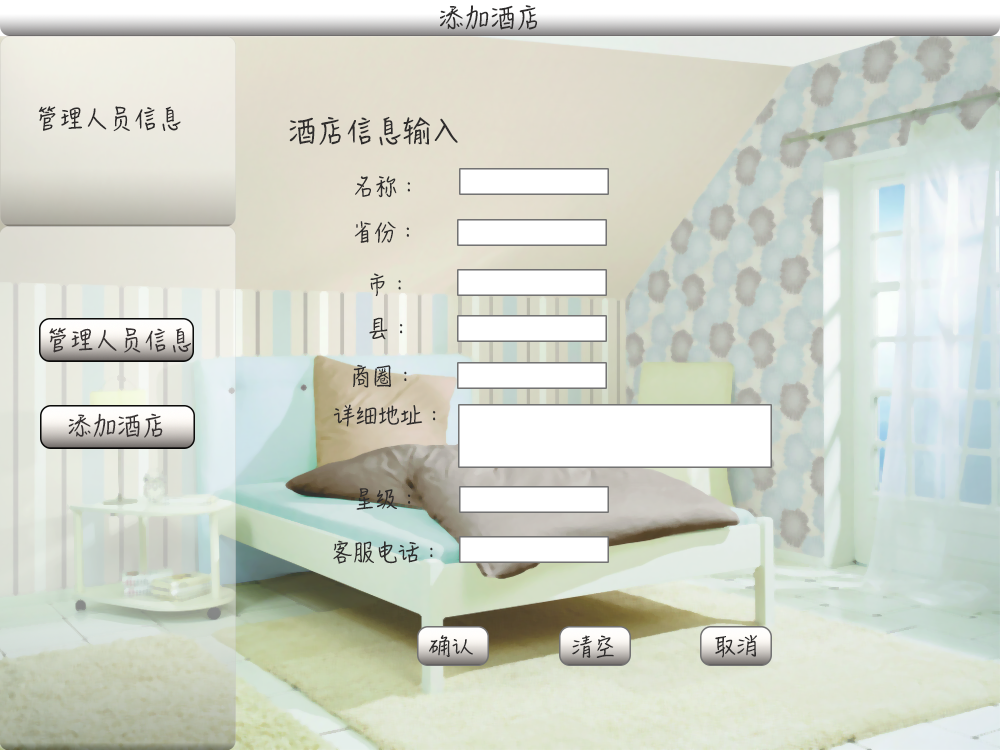
<style>
.page{position:relative;width:1000px;height:750px}
.page>*{position:absolute;margin:0}
.t1{font:25px "HanziPenSC-W5";letter-spacing:-0.005em;color:#2f2d2d;text-transform:uppercase}
.t2{font:24px "HanziPenSC-W5";letter-spacing:-0.005em;color:#2d2b2b;text-transform:uppercase}
.t3{font:28px "HanziPenSC-W5";letter-spacing:-0.005em;color:#2f2d2d;text-transform:uppercase}
.t4{font:22px "HanziPenSC-W5";letter-spacing:-0.005em;color:#2f2d2d;text-transform:uppercase}
</style>
<div class="page">
<p class="t1" style="left:440px;top:5px;width:98px;height:25px">添加酒店</p>
<p class="t2" style="left:38px;top:106px;width:143px;height:26px">管理人员信息</p>
<p class="t3" style="left:289px;top:116px;width:169px;height:30px">酒店信息输入</p>
<p class="t4" style="left:355px;top:176px;width:55px;height:22px">名称：</p>
<p class="t4" style="left:354px;top:221px;width:55px;height:22px">省份：</p>
<p class="t4" style="left:370px;top:273px;width:31px;height:24px">市：</p>
<p class="t4" style="left:369px;top:317px;width:34px;height:23px">县：</p>
<p class="t4" style="left:353px;top:364px;width:54px;height:24px">商圈：</p>
<p class="t4" style="left:333px;top:404px;width:103px;height:23px">详细地址：</p>
<p class="t4" style="left:356px;top:488px;width:55px;height:22px">星级：</p>
<p class="t4" style="left:333px;top:540px;width:100px;height:24px">客服电话：</p>
</div>
